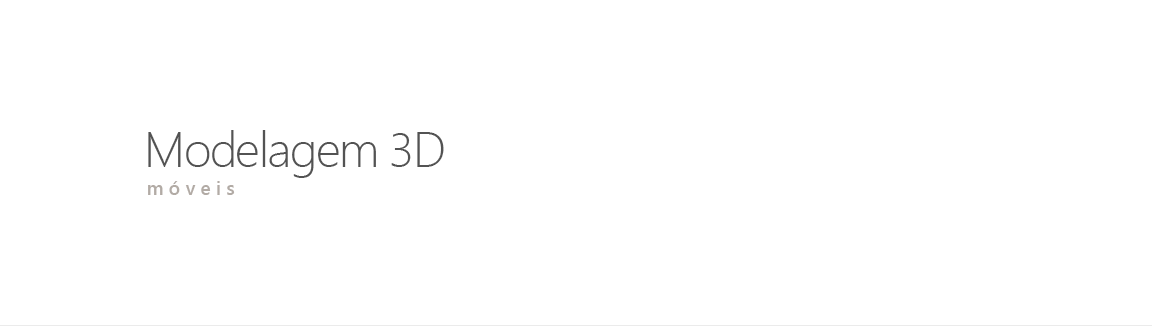
<style>
.page{position:relative;width:1152px;height:326px;background:#ffffff}
.page>*{position:absolute;margin:0}
.t1{font:48.8px "SegoeUI-Light";letter-spacing:-0.03em;color:#535353}
.t2{font:18.7px "SegoeUI-Semibold";letter-spacing:0.3em;color:#b2aba5}
</style>
<div class="page">
<p class="t1" style="left:148px;top:130px;width:296px;height:48px">Modelagem 3D</p>
<p class="t2" style="left:148px;top:181px;width:87px;height:14px">móveis</p>
</div>
